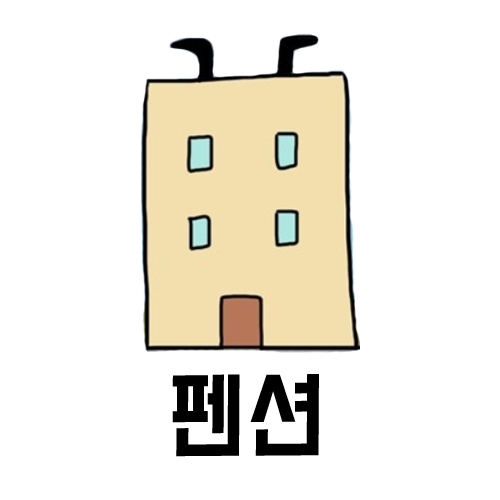
<style>
.page{position:relative;width:500px;height:500px;background:#ffffff}
.page>*{position:absolute;margin:0}
.t1{font:85.8px "BMDoHyeon";color:#000000;scale:0.96 1}
</style>
<div class="page">
<p class="t1" style="left:172px;top:374px;width:147px;height:83px">펜션</p>
</div>
